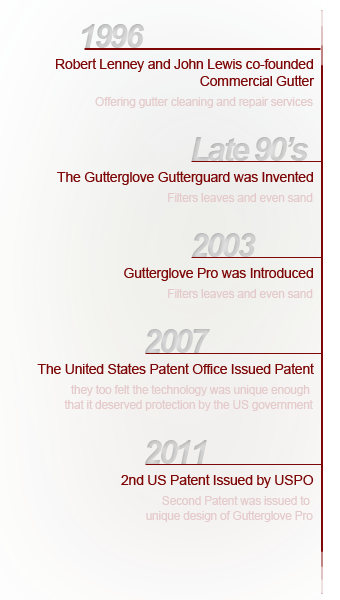
<style>
.page{position:relative;width:340px;height:600px}
.page>*{position:absolute;margin:0}
.t1{font:33.3px "Arial-BoldItalicMT";letter-spacing:-0.09em;color:#e1e1e1}
.t2{font:14.4px "ArialMT";letter-spacing:-0.03em;color:#7e0707}
.t3{font:12.2px "ArialMT";letter-spacing:-0.03em;color:#e4caca}
</style>
<div class="page">
<p class="t1" style="left:82px;top:24px;width:63px;height:24px">1996</p>
<p class="t2" style="left:56px;top:58px;width:259px;height:28px;text-align:right">Robert Lenney and John Lewis co-founded<br>Commercial Gutter</p>
<p class="t3" style="left:95px;top:97px;width:218px;height:11px">Offering gutter cleaning and repair services</p>
<p class="t1" style="left:191px;top:137px;width:118px;height:24px">Late 90’s</p>
<p class="t2" style="left:57px;top:171px;width:256px;height:14px">The Gutterglove Gutterguard was Invented</p>
<p class="t3" style="left:168px;top:193px;width:145px;height:9px">Filters leaves and even sand</p>
<p class="t1" style="left:192px;top:233px;width:64px;height:24px">2003</p>
<p class="t2" style="left:124px;top:267px;width:189px;height:14px">Gutterglove Pro was Introduced</p>
<p class="t3" style="left:168px;top:289px;width:145px;height:9px">Filters leaves and even sand</p>
<p class="t1" style="left:145px;top:329px;width:65px;height:24px">2007</p>
<p class="t2" style="left:37px;top:363px;width:277px;height:11px">The United States Patent Office Issued Patent</p>
<p class="t3" style="left:64px;top:385px;width:249px;height:26px;text-align:right">they too felt the technology was unique enough <br>that it deserved protection by the US government</p>
<p class="t1" style="left:145px;top:440px;width:62px;height:24px">2011</p>
<p class="t2" style="left:121px;top:474px;width:193px;height:14px">2nd US Patent Issued by USPO</p>
<p class="t3" style="left:146px;top:496px;width:167px;height:26px;text-align:right">Second Patent was issued to <br>unique design of Gutterglove Pro</p>
</div>
